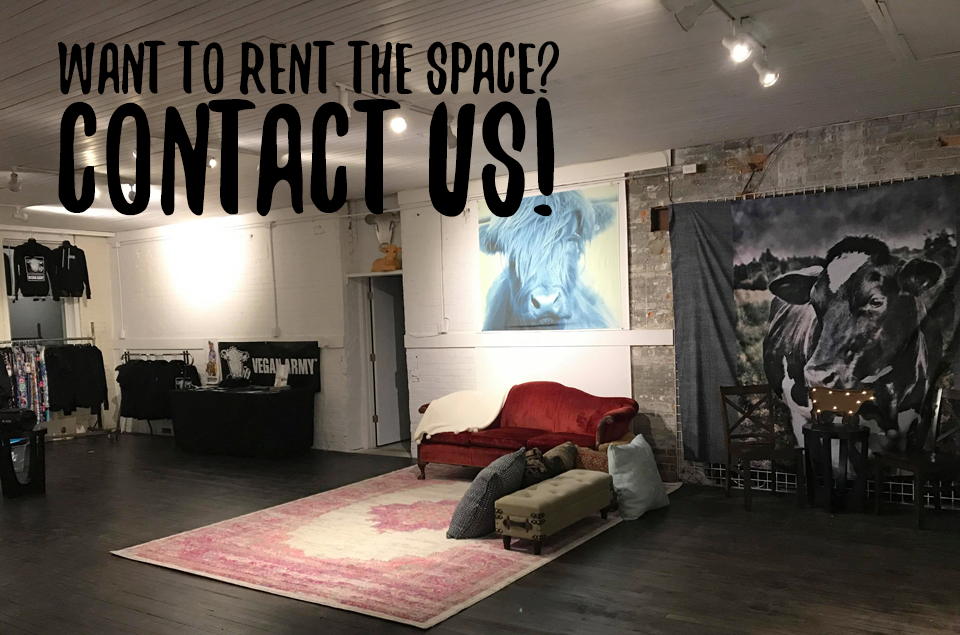
<style>
.page{position:relative;width:960px;height:635px}
.page>*{position:absolute;margin:0}
.t1{font:80px/62.5px "YeahPapa";color:#000000}
.t2{font:173.7px/120px "YeahPapa";color:#000000}
</style>
<div class="page">
<p class="t1" style="left:58px;top:40px;width:501px;height:178px;text-align:center">Want To ReNT THE SPACE?<br><span class="t2">Contact US!</span></p>
</div>
